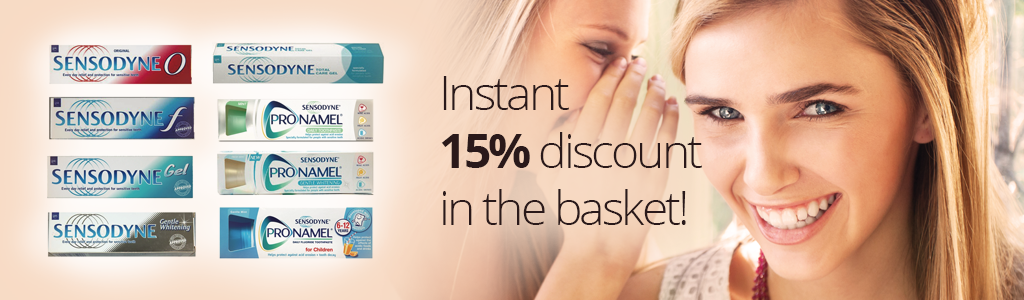
<style>
.page{position:relative;width:1024px;height:300px}
.page>*{position:absolute;margin:0}
.t1{font:48px "OpenSans-Light";letter-spacing:-0.06em;color:#2a191a}
.t2{font:48px "OpenSans-Bold";letter-spacing:-0.06em;color:#2a191a}
</style>
<div class="page">
<p class="t1" style="left:441px;top:76px;width:261px;height:149px">Instant<br><span class="t2">15% </span>discount<br>in the basket!</p>
</div>
